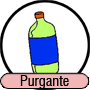
<style>
.page{position:relative;width:90px;height:90px;background:#ffffff}
.page>*{position:absolute;margin:0}
.t1{font:14.7px "Swiss721BT-RomanCondensed";color:#000000}
</style>
<div class="page">
<p class="t1" style="left:20px;top:75px;width:49px;height:14px">Purgante</p>
</div>
